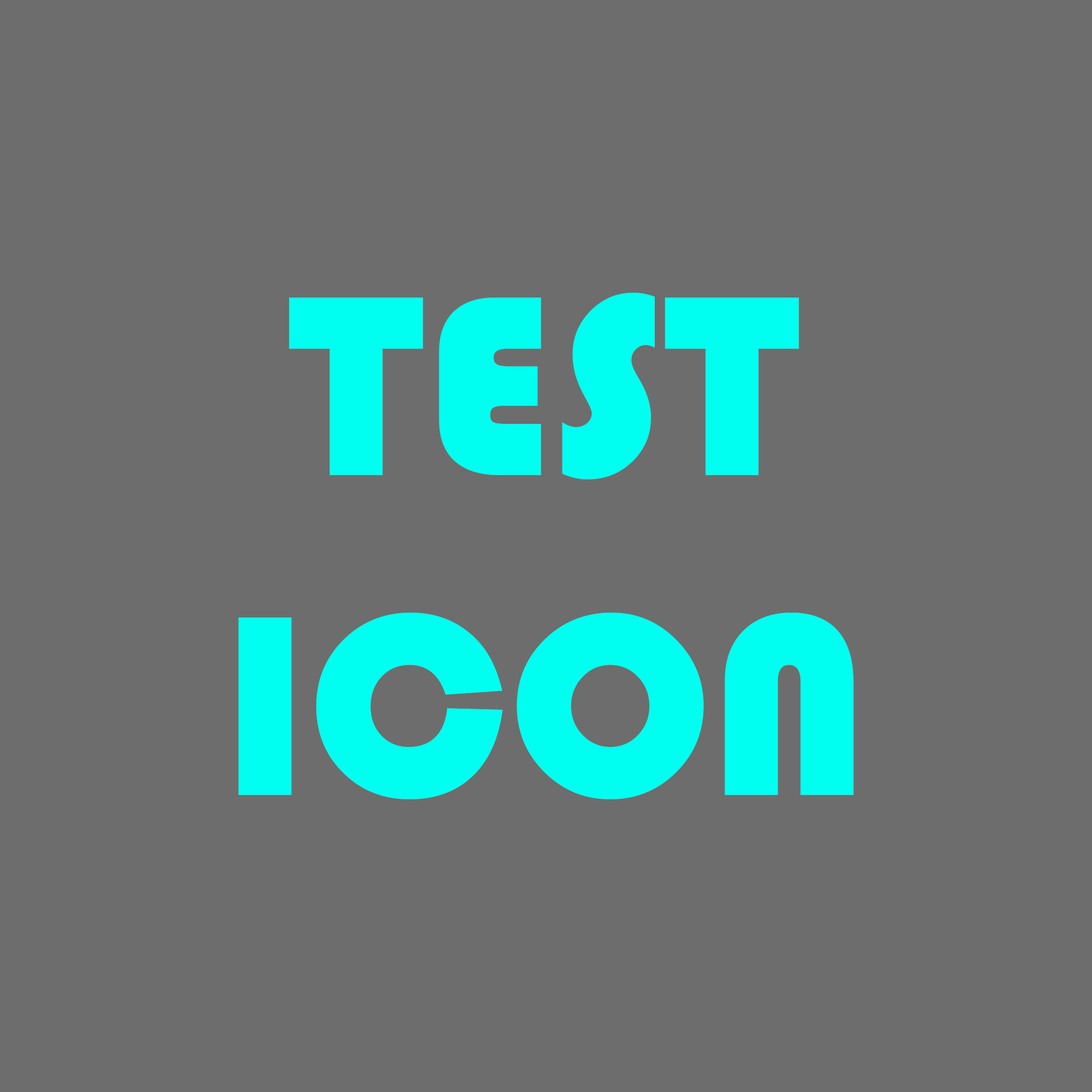
<style>
.page{position:relative;width:1092px;height:1092px;background:#6d6d6d}
.page>*{position:absolute;margin:0}
.t1{font:266.6px "Bauhaus93";color:#00fff0}
</style>
<div class="page">
<p class="t1" style="left:238px;top:293px;width:616px;height:506px;text-align:center">TEST<br>ICON</p>
</div>
